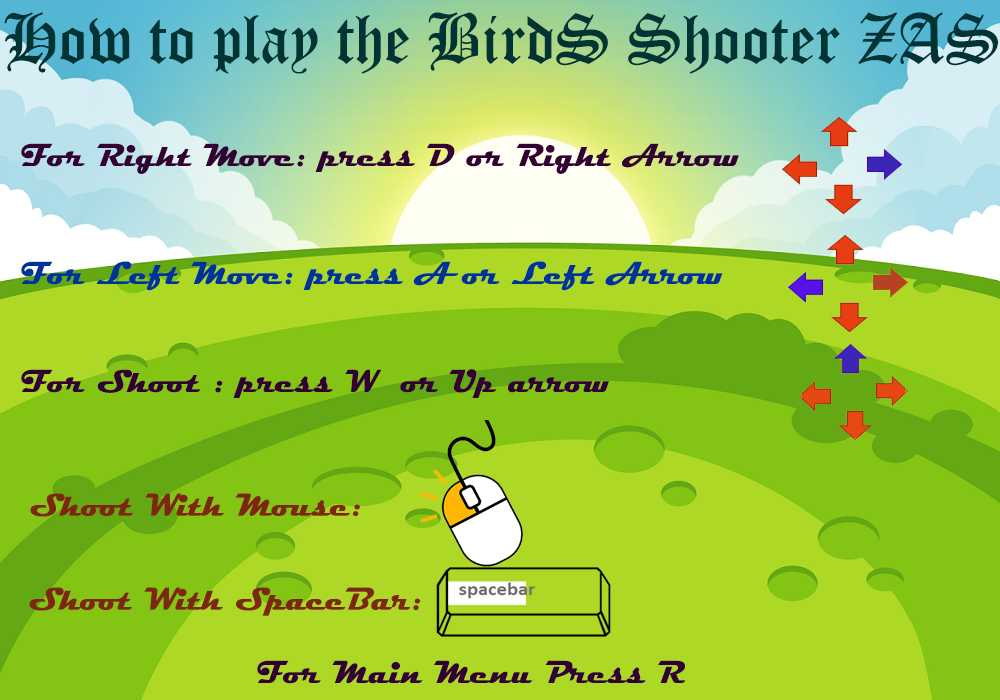
<style>
.page{position:relative;width:1000px;height:700px;background:#add926}
.page>*{position:absolute;margin:0}
.t1{font:69.4px "OldEnglishTextMT";color:#003333;scale:0.94 1}
.t2{font:32px "Magneto-Bold";color:#330033}
.t3{font:32px "Magneto-Bold";color:#003399}
.t4{font:32px "Magneto-Bold";color:#7e2710}
</style>
<div class="page">
<p class="t1" style="left:4px;top:12px;width:994px;height:62px">How to play the BirdS Shooter ZAS</p>
<p class="t2" style="left:21px;top:143px;width:718px;height:31px">For Right Move: press D or Right Arrow</p>
<p class="t3" style="left:21px;top:261px;width:702px;height:30px">For Left Move: press A or Left Arrow</p>
<p class="t2" style="left:21px;top:369px;width:588px;height:29px">For Shoot : press W  or Up arrow</p>
<p class="t4" style="left:30px;top:493px;width:330px;height:24px">Shoot With Mouse:</p>
<p class="t4" style="left:29px;top:587px;width:392px;height:29px">Shoot With SpaceBar:</p>
<p class="t2" style="left:257px;top:660px;width:429px;height:24px">For Main Menu Press R</p>
</div>
